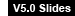
<style>
.page{position:relative;width:75px;height:16px;background:#000000}
.page>*{position:absolute;margin:0}
.t1{font:11px "Arial-BoldMT";color:#ffffff}
</style>
<div class="page">
<p class="t1" style="left:13px;top:4px;width:58px;height:8px">V5.0 Slides</p>
</div>
